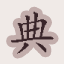
<style>
.page{position:relative;width:64px;height:64px;background:#f0eae7}
.page>*{position:absolute;margin:0}
.t1{font:48px "¿¬Ìå";color:#392529}
</style>
<div class="page">
<p class="t1" style="left:11px;top:11px;width:43px;height:43px">典</p>
</div>
